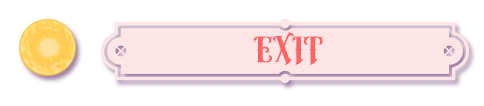
<style>
.page{position:relative;width:484px;height:106px;background:#ffffff}
.page>*{position:absolute;margin:0}
.t1{font:41.7px "Moyers";color:#ff6262}
</style>
<div class="page">
<p class="t1" style="left:254px;top:31px;width:70px;height:34px">EXIT</p>
</div>
